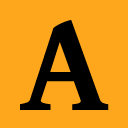
<style>
.page{position:relative;width:128px;height:128px;background:#ffa71c}
.page>*{position:absolute;margin:0}
.t1{font:140.2px "GentiumBookBasic-Bold";color:#000000}
</style>
<div class="page">
<p class="t1" style="left:20px;top:20px;width:89px;height:90px">A</p>
</div>
